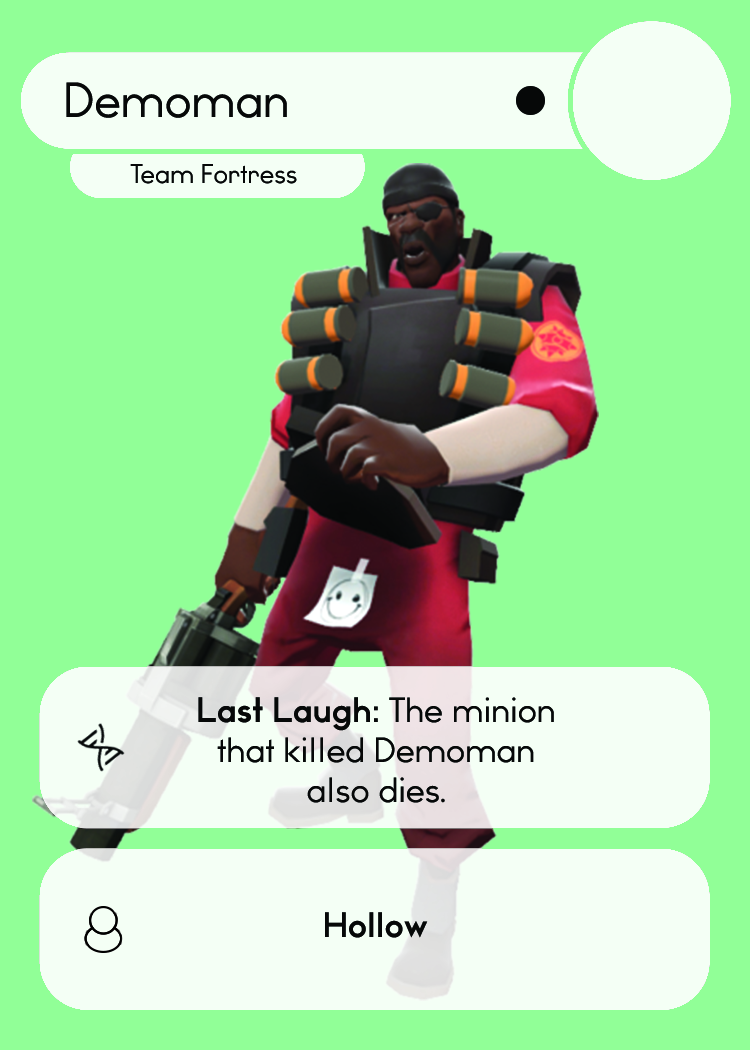
<style>
.page{position:relative;width:750px;height:1050px;background:#91ff97}
.page>*{position:absolute;margin:0}
.t1{font:46.7px "WatchwordRegularDemo";color:#060808}
.t2{font:25.5px "WatchwordRegularDemo";color:#060808}
.t3{font:33.3px "WatchwordRegularDemo";color:#060808}
.t4{font:33.3px "WatchwordBoldDemo";color:#060808}
.t5{font:33.3px "Dosis-Medium";color:#060808}
</style>
<div class="page">
<p class="t1" style="left:66px;top:82px;width:221px;height:36px">Demoman</p>
<p class="t2" style="left:130px;top:164px;width:167px;height:20px">Team Fortress</p>
<p class="t3" style="left:198px;top:697px;width:356px;height:106px;text-align:center"><span class="t4">Last Laugh: </span>The minion<br>that killed Demoman<br>also dies<span class="t5">.</span></p>
<p class="t4" style="left:325px;top:912px;width:103px;height:26px">Hollow</p>
</div>
